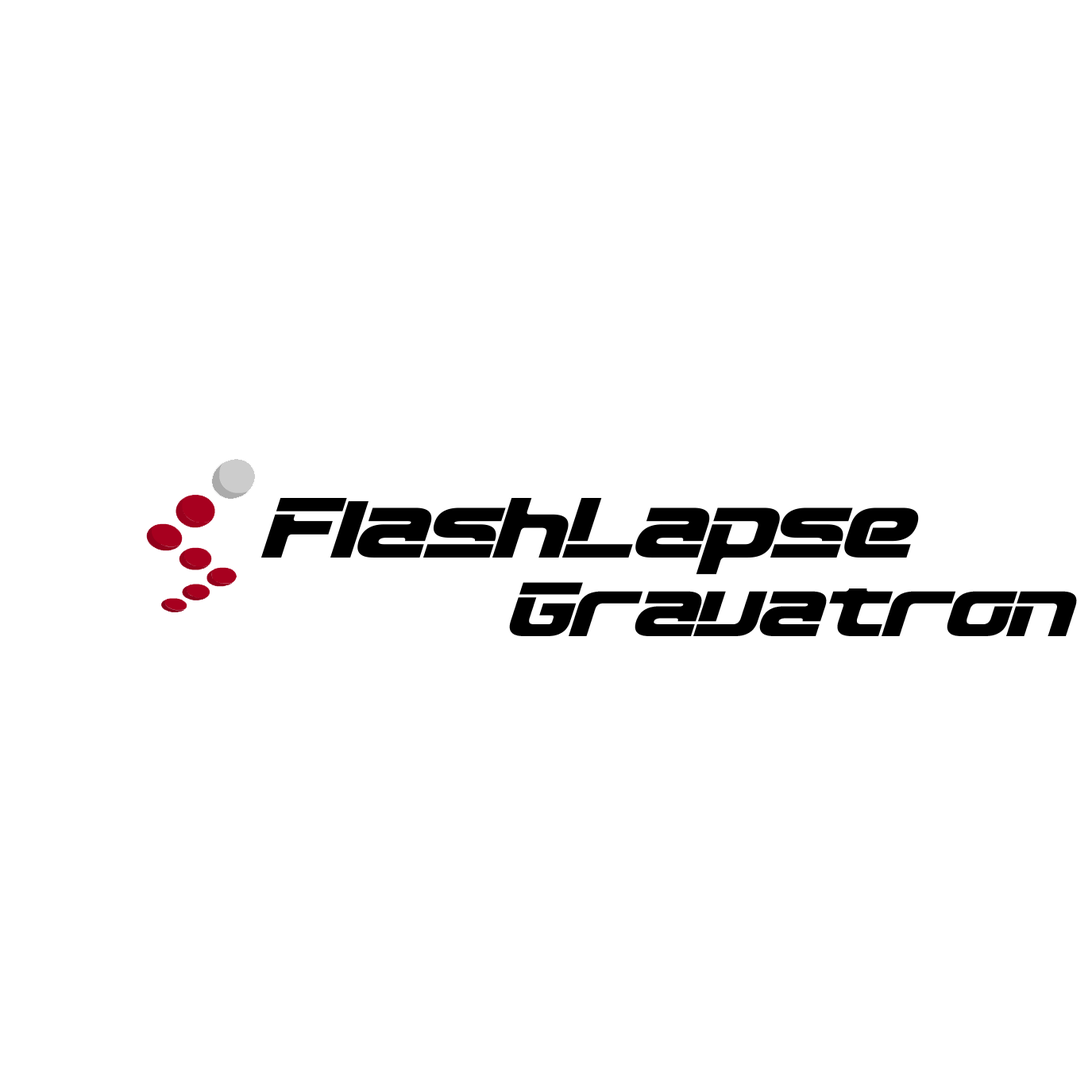
<style>
.page{position:relative;width:1092px;height:1092px;background:#ffffff}
.page>*{position:absolute;margin:0}
.t1{font:84.7px "D3-Circuitism-Oblique";color:#000000}
.t2{font:76.2px "D3-Circuitism-Oblique";color:#000000}
</style>
<div class="page">
<p class="t1" style="left:261px;top:498px;width:658px;height:76px">FlashLapse</p>
<p class="t2" style="left:509px;top:582px;width:568px;height:54px">Gravatron</p>
</div>
